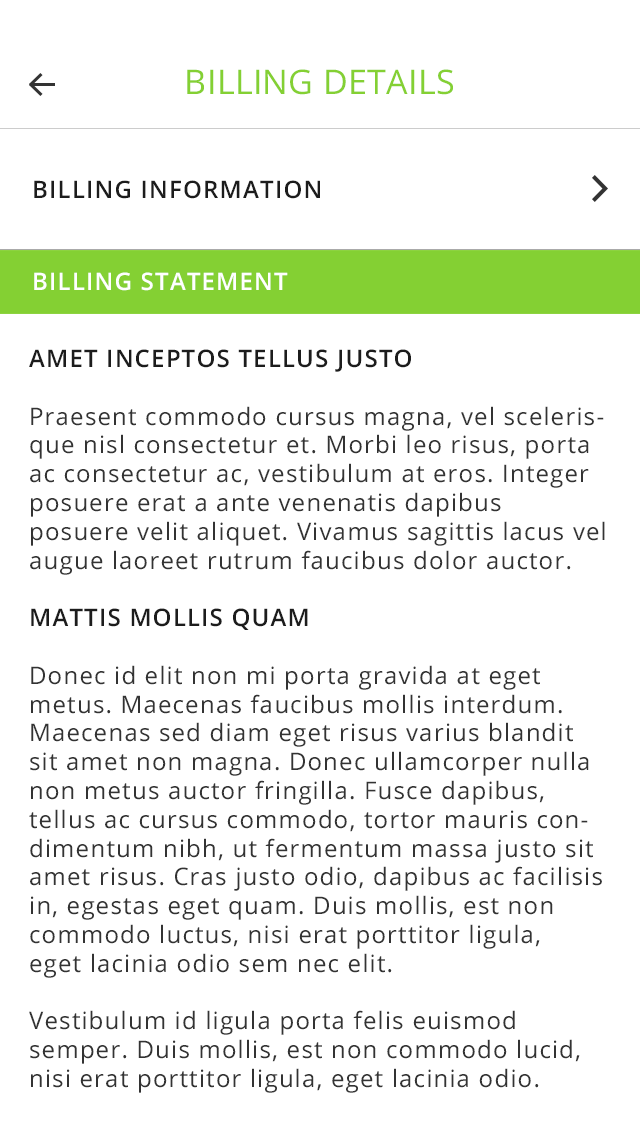
<style>
.page{position:relative;width:640px;height:1136px;background:#ffffff}
.page>*{position:absolute;margin:0}
.t1{font:34px "OpenSans";letter-spacing:0.01em;color:#84d033;text-transform:uppercase}
.t2{font:24px "OpenSans-Semibold";letter-spacing:0.05em;color:#1c1c1c;text-transform:uppercase}
.t3{font:24px "OpenSans-Semibold";letter-spacing:0.05em;color:#ffffff;text-transform:uppercase}
.t4{font:24px "OpenSans";letter-spacing:0.05em;color:#333333}
</style>
<div class="page">
<p class="t1" style="left:187px;top:69px;width:266px;height:26px">BILLING DETAILS</p>
<p class="t2" style="left:34px;top:180px;width:286px;height:19px">BILLING INFORMATION</p>
<p class="t3" style="left:34px;top:272px;width:254px;height:19px">BILLING STATEMENT</p>
<p class="t4" style="left:29px;top:349px;width:576px;height:744px"><span class="t2">Amet Inceptos Tellus Justo<br><br></span>Praesent commodo cursus magna, vel scelerisque nisl consectetur et. Morbi leo risus, porta ac consectetur ac, vestibulum at eros. Integer posuere erat a ante venenatis dapibus posuere velit aliquet. Vivamus sagittis lacus vel augue laoreet rutrum faucibus dolor auctor.<br><br><span class="t2">Mattis Mollis Quam<br><br></span>Donec id elit non mi porta gravida at eget metus. Maecenas faucibus mollis interdum. Maecenas sed diam eget risus varius blandit sit amet non magna. Donec ullamcorper nulla non metus auctor fringilla. Fusce dapibus, tellus ac cursus commodo, tortor mauris condimentum nibh, ut fermentum massa justo sit amet risus. Cras justo odio, dapibus ac facilisis in, egestas eget quam. Duis mollis, est non commodo luctus, nisi erat porttitor ligula, <br>eget lacinia odio sem nec elit.<br><br>Vestibulum id ligula porta felis euismod semper. Duis mollis, est non commodo lucid, nisi erat porttitor ligula, eget lacinia odio.</p>
</div>
